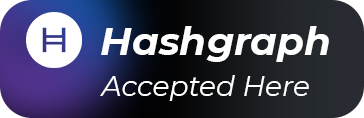
<style>
.page{position:relative;width:364px;height:118px}
.page>*{position:absolute;margin:0}
.t1{font:39px "Montserrat-BoldItalic";color:#ffffff}
.t2{font:28px "Montserrat-Italic";color:#ffffff}
</style>
<div class="page">
<p class="t1" style="left:101px;top:26px;width:228px;height:36px">Hashgraph</p>
<p class="t2" style="left:100px;top:75px;width:209px;height:26px">Accepted Here</p>
</div>
